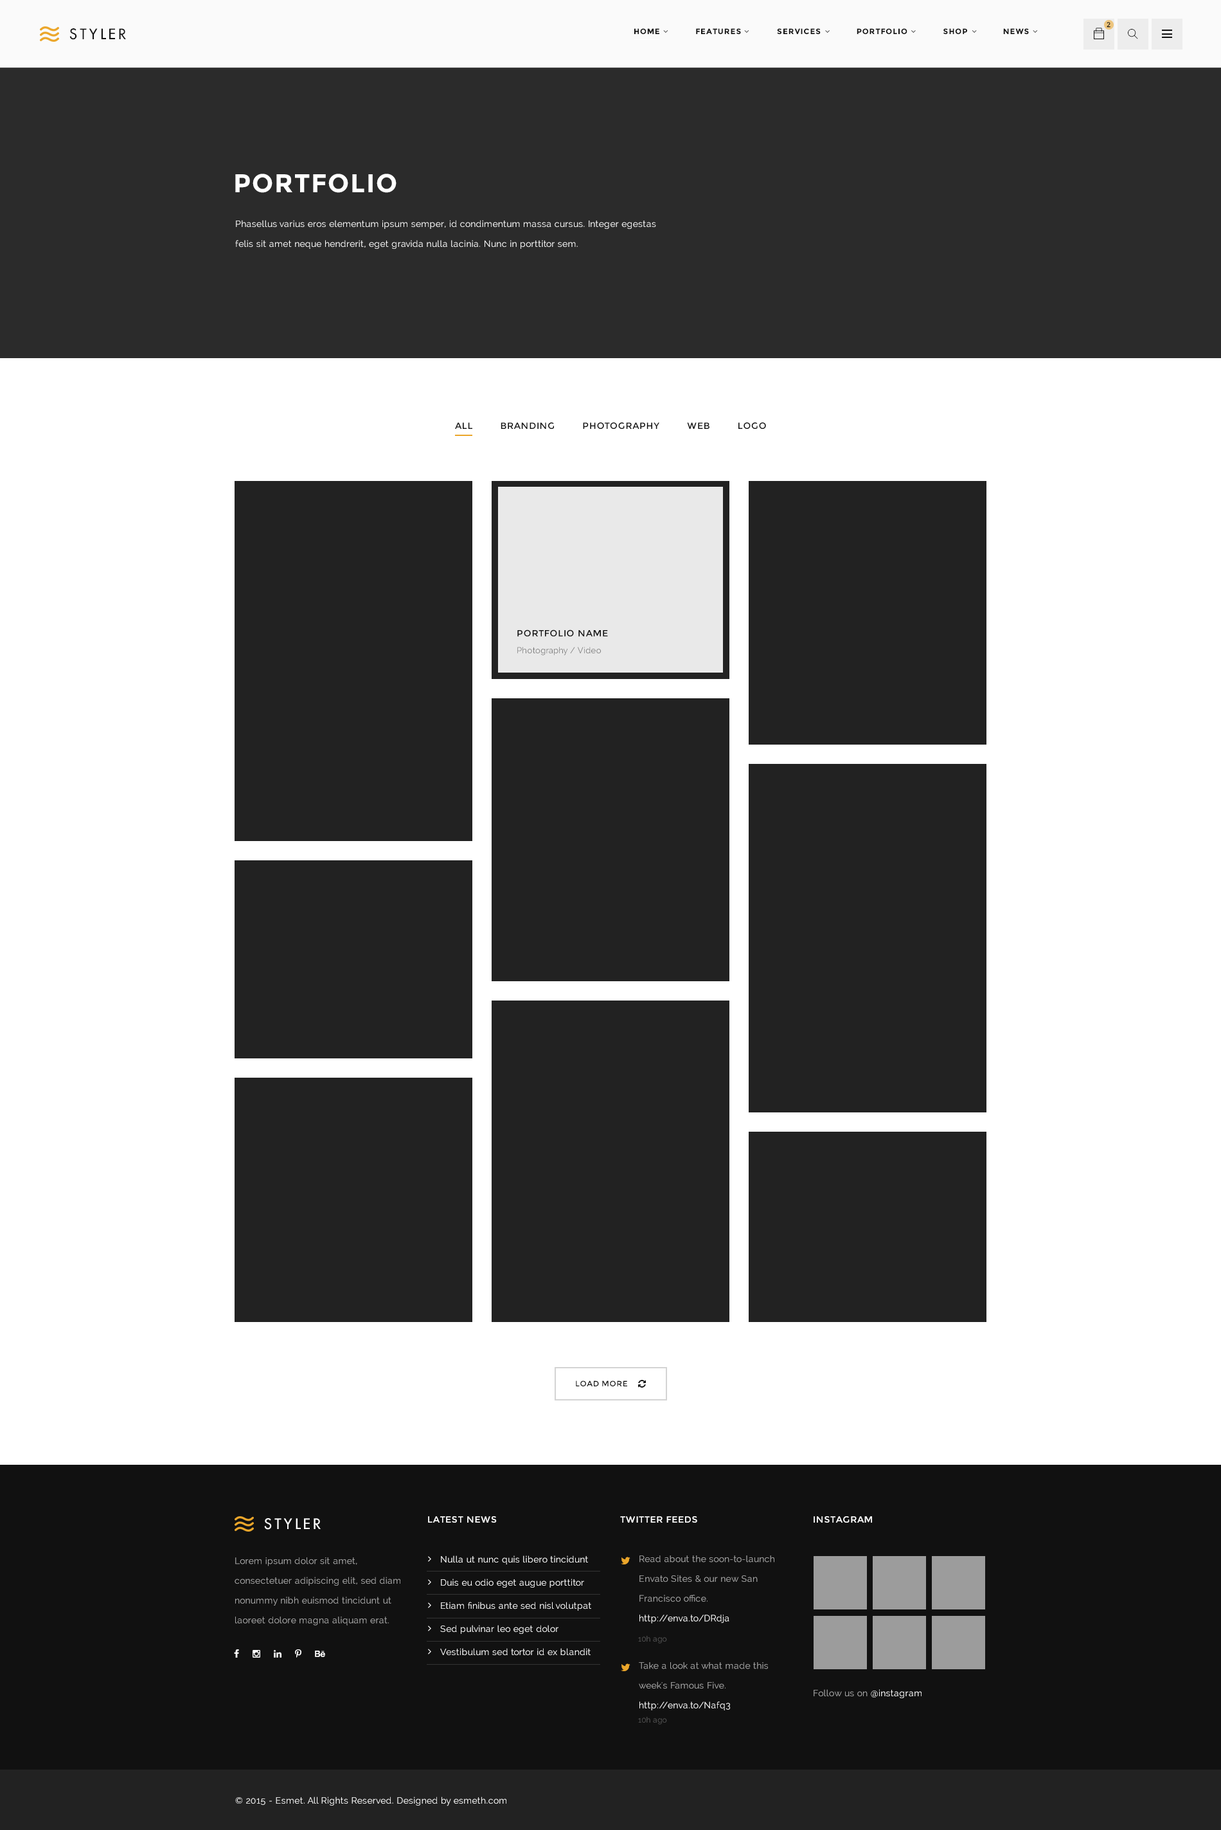
<style>
.page{position:relative;width:1221px;height:1830px;background:#ffffff}
.page>*{position:absolute;margin:0}
.t1{font:14.1px "FuturaLT";letter-spacing:0.2em;color:#111111;text-transform:uppercase}
.t2{font:7.7px "Montserrat-Bold";letter-spacing:0.075em;color:#111111;text-transform:uppercase}
.t3{font:7.1px "Montserrat-Regular";letter-spacing:0.075em;color:#111111;text-transform:uppercase}
.t4{font:25.7px "Montserrat-Bold";letter-spacing:0.05em;color:#ffffff;text-transform:uppercase}
.t5{font:9px/19.8px "Raleway";letter-spacing:0.02em;color:#ffffff}
.t6{font:9px "Montserrat-Regular";letter-spacing:0.05em;color:#111111;text-transform:uppercase}
.t7{font:8.4px "Raleway";letter-spacing:0.02em;color:#777777}
.t8{font:7.7px "Montserrat-Regular";letter-spacing:0.05em;color:#111111;text-transform:uppercase}
.t9{font:14.1px "FuturaLT";letter-spacing:0.2em;color:#ffffff;text-transform:uppercase}
.t10{font:9px "Montserrat-Regular";letter-spacing:0.05em;color:#ffffff;text-transform:uppercase}
.t11{font:9px/19.8px "Raleway";letter-spacing:0.02em;color:#a9a9a9}
.t12{font:9px/23.1px "Raleway";letter-spacing:0.02em;color:#ffffff}
.t13{font:7.7px "Raleway";letter-spacing:0.02em;color:#545454}
.t14{font:9px "Raleway";letter-spacing:0.02em;color:#a9a9a9}
.t15{font:9px "Raleway";letter-spacing:0.02em;color:#ffffff}
</style>
<div class="page">
<p class="t1" style="left:69px;top:28px;width:57px;height:12px">styler</p>
<p class="t2" style="left:634px;top:28px;width:395px;height:6px">HOME              FEATURES              SERVICES              portfolio              SHOP              NEWS</p>
<p class="t3" style="left:1107px;top:22px;width:4px;height:6px">2</p>
<p class="t4" style="left:235px;top:174px;width:162px;height:19px">portfolio</p>
<p class="t5" style="left:235px;top:220px;width:421px;height:29px">Phasellus varius eros elementum ipsum semper, id condimentum massa cursus. Integer egestas felis sit amet neque hendrerit, eget gravida nulla lacinia. Nunc in porttitor sem.</p>
<p class="t6" style="left:455px;top:422px;width:311px;height:7px">All         branding         Photography         web         logo</p>
<p class="t6" style="left:518px;top:629px;width:90px;height:7px">portfolio name</p>
<p class="t7" style="left:518px;top:647px;width:83px;height:8px">Photography / Video</p>
<p class="t8" style="left:576px;top:1380px;width:51px;height:6px">load more</p>
<p class="t9" style="left:264px;top:1518px;width:57px;height:11px">styler</p>
<p class="t10" style="left:428px;top:1516px;width:69px;height:6px">latest news</p>
<p class="t10" style="left:620px;top:1516px;width:78px;height:6px">twitter feeds</p>
<p class="t10" style="left:814px;top:1516px;width:58px;height:6px">instagram</p>
<p class="t11" style="left:235px;top:1557px;width:166px;height:68px">Lorem ipsum dolor sit amet, consectetuer adipiscing elit, sed diam nonummy nibh euismod tincidunt ut laoreet dolore magna aliquam erat.</p>
<p class="t12" style="left:440px;top:1555px;width:151px;height:100px">Nulla ut nunc quis libero tincidunt<br>Duis eu odio eget augue porttitor<br>Etiam finibus ante sed nisl volutpat<br>Sed pulvinar leo eget dolor<br>Vestibulum sed tortor id ex blandit</p>
<p class="t11" style="left:640px;top:1555px;width:135px;height:68px">Read about the soon-to-launch Envato Sites &amp; our new San Francisco office. <span class="t5">http://enva.to/DRdja</span></p>
<p class="t13" style="left:638px;top:1635px;width:29px;height:8px">10h ago</p>
<p class="t11" style="left:639px;top:1662px;width:129px;height:48px">Take a look at what made this week's Famous Five. <span class="t5">http://enva.to/Nafq3</span></p>
<p class="t14" style="left:814px;top:1689px;width:108px;height:9px">Follow us on <span class="t15">@instagram</span></p>
<p class="t13" style="left:638px;top:1716px;width:29px;height:8px">10h ago</p>
<p class="t15" style="left:235px;top:1796px;width:272px;height:10px">© 2015 - Esmet. All Rights Reserved. Designed by esmeth.com</p>
</div>
